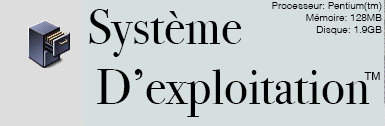
<style>
.page{position:relative;width:385px;height:126px;background:#d6dfdf}
.page>*{position:absolute;margin:0}
.t1{font:10px "Helvetica-Light";color:#000000}
.t2{font:50px "BodoniSvtyTwoOSITCTT-Book";color:#000000}
.t3{font:11px "Helvetica";color:#000000}
</style>
<div class="page">
<p class="t1" style="left:272px;top:2px;width:110px;height:33px;text-align:right">Processeur: Pentium(tm)<br>Mémoire: 128MB<br>Disque: 1.9GB</p>
<p class="t2" style="left:89px;top:9px;width:281px;height:108px">Système<br> D’exploitation</p>
<p class="t3" style="left:364px;top:72px;width:16px;height:8px">TM</p>
</div>
